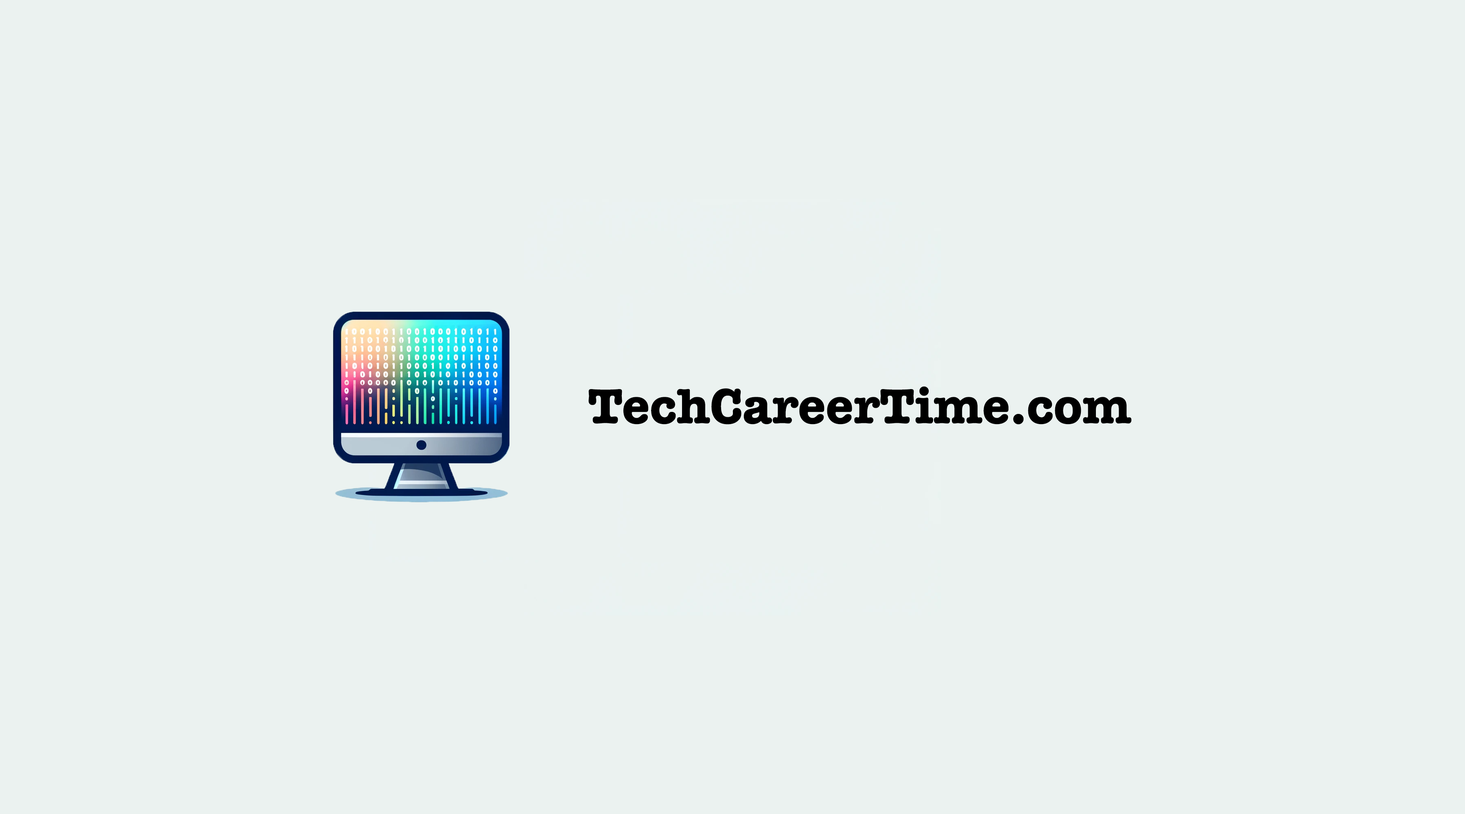
<style>
.page{position:relative;width:1465px;height:814px;background:#ebf2f0}
.page>*{position:absolute;margin:0}
.t1{font:50.9px "AmericanTypewriter-Bold";color:#000000}
</style>
<div class="page">
<p class="t1" style="left:588px;top:386px;width:544px;height:38px">TechCareerTime.com</p>
</div>
